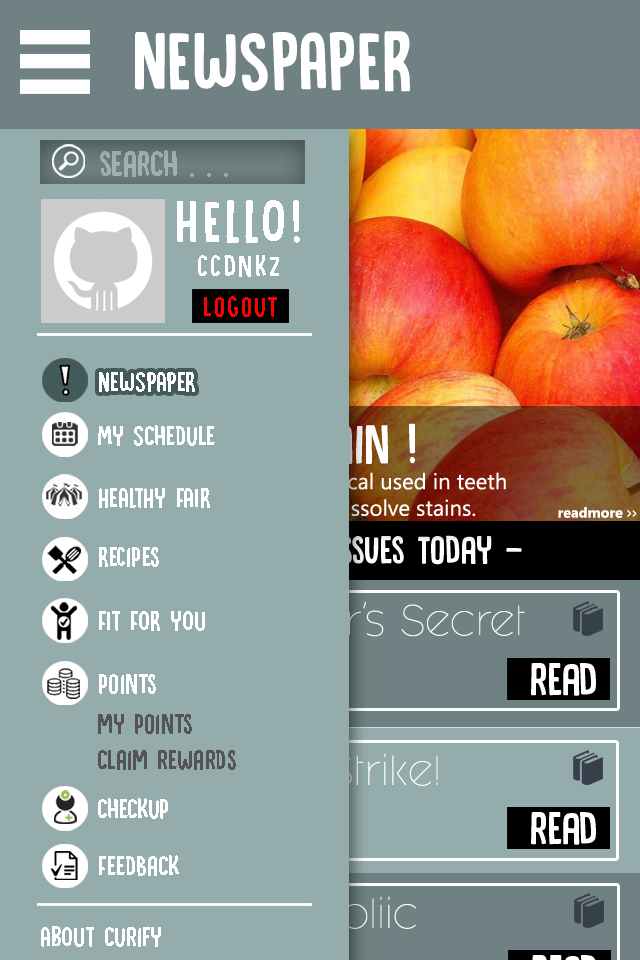
<style>
.page{position:relative;width:640px;height:960px;background:#95acad}
.page>*{position:absolute;margin:0}
.t1{font:86.6px "DKCanoodle-Regular";color:#ffffff}
.t2{font:38px "DKCanoodle-Regular";color:#a3aeae}
.t3{font:62.5px "DKCanoodle-Regular";letter-spacing:0.075em;color:#ffffff}
.t4{font:32.1px "DKCanoodle-Regular";letter-spacing:0.075em;color:#ffffff}
.t5{font:29.9px "DKCanoodle-Regular";letter-spacing:0.075em;color:#ff0000}
.t6{font:29.5px "DKCanoodle-Regular";color:#ffffff}
.t7{font:14.3px "Ebrima-Bold";color:#ffffff}
.t8{font:14.3px "Ebrima-Bold";color:#ffffff;scale:0.5 1}
.t9{font:41.1px "DKCanoodle-Regular"}
.t10{font:35.4px "FashionFetishLight"}
.t11{font:47.9px "DKCanoodle-Regular";color:#ffffff}
.t12{font:29.5px "DKCanoodle-Regular";color:#545454}
</style>
<div class="page">
<p class="t1" style="left:135px;top:31px;width:275px;height:61px">NEWSPAPER</p>
<p class="t2" style="left:100px;top:150px;width:128px;height:27px">search . . .</p>
<p class="t3" style="left:177px;top:200px;width:123px;height:43px">HELLO!</p>
<p class="t4" style="left:198px;top:255px;width:81px;height:22px">ccdnkz</p>
<p class="t5" style="left:204px;top:296px;width:73px;height:21px">logout</p>
<p class="t6" style="left:99px;top:372px;width:96px;height:20px">NEWSPAPER</p>
<p class="t6" style="left:98px;top:425px;width:117px;height:21px">My Schedule</p>
<p class="t6" style="left:99px;top:488px;width:111px;height:20px">HEALTHY FAIR</p>
<p class="t7" style="left:558px;top:507px;width:79px;height:11px">readmore <span class="t8">&gt;&gt;</span></p>
<p class="t9" style="left:132px;top:535px;width:390px;height:30px">- another hot issues today -</p>
<p class="t6" style="left:99px;top:547px;width:60px;height:20px">RECipes</p>
<p class="t10" style="left:174px;top:602px;width:351px;height:35px">Lavender’s Secret</p>
<p class="t6" style="left:99px;top:611px;width:106px;height:20px">FIT FOR YOU</p>
<p class="t11" style="left:531px;top:663px;width:65px;height:33px">read</p>
<p class="t6" style="left:99px;top:674px;width:57px;height:20px">points</p>
<p class="t12" style="left:98px;top:714px;width:138px;height:56px">my points<br>claim rewards</p>
<p class="t10" style="left:173px;top:753px;width:265px;height:34px">Lemon Strike!</p>
<p class="t6" style="left:98px;top:798px;width:70px;height:21px">checkup</p>
<p class="t11" style="left:531px;top:812px;width:65px;height:33px">read</p>
<p class="t6" style="left:99px;top:855px;width:80px;height:21px">Feedback</p>
</div>
